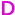
<style>
.page{position:relative;width:15px;height:15px;background:#ffffff}
.page>*{position:absolute;margin:0}
.t1{font:21px "ProximaNova-Regular";letter-spacing:0.16em;color:#db08d4;font-weight:bold}
</style>
<div class="page">
<p class="t1" style="left:2px;top:1px;width:13px;height:15px">D</p>
</div>
